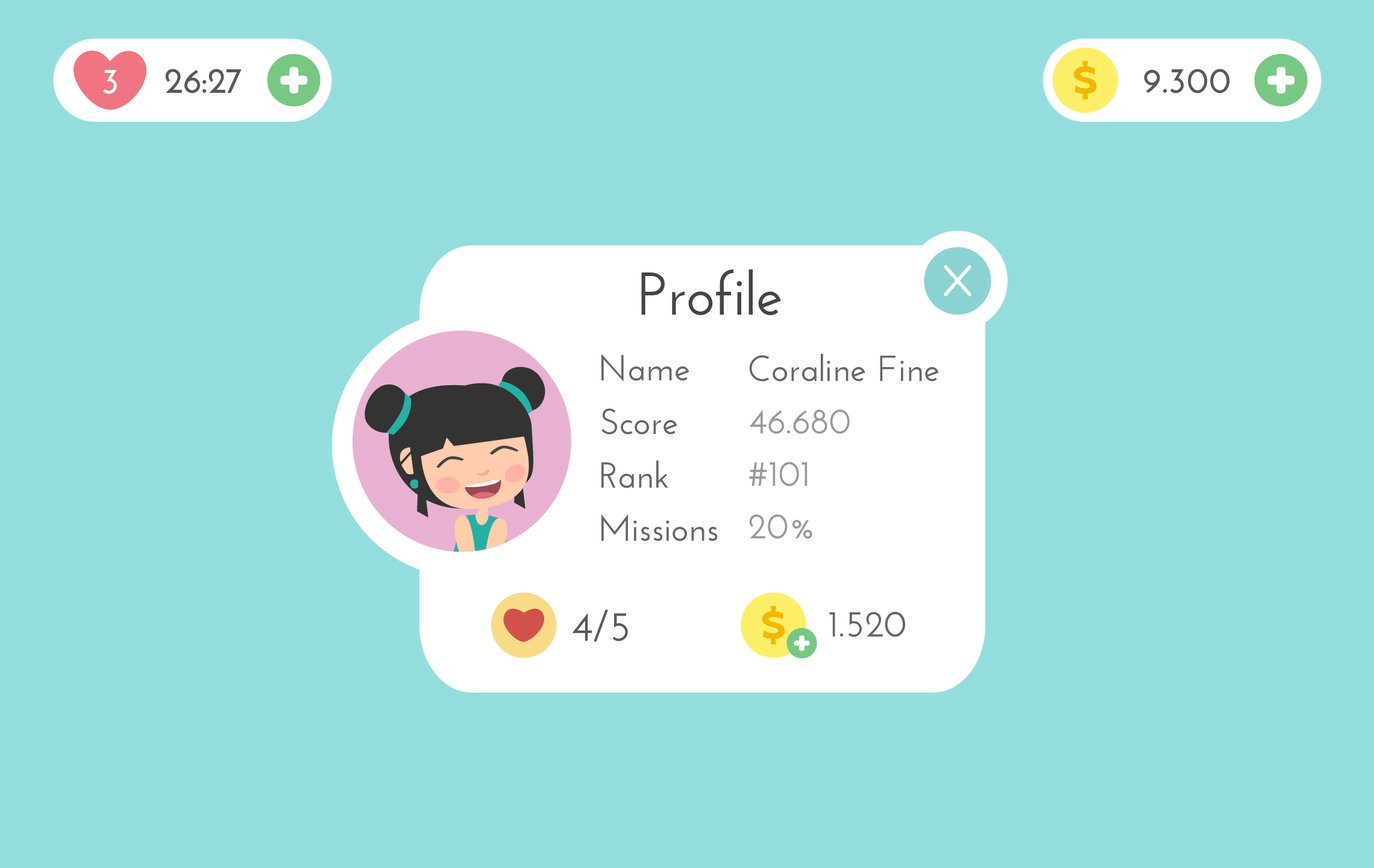
<style>
.page{position:relative;width:1374px;height:868px;background:#93dedd}
.page>*{position:absolute;margin:0}
.t1{font:36.2px "JosefinSans-Bold";color:#ffffff}
.t2{font:36.2px "JosefinSans-Bold";color:#595959}
.t3{font:60.3px "JosefinSans-SemiBold";color:#444444}
.t4{font:36.2px "JosefinSans-SemiBold";color:#666666}
.t5{font:36.2px "JosefinSans-SemiBold";color:#999999}
.t6{font:42.2px "JosefinSans-SemiBold";color:#595959}
.t7{font:37.4px "JosefinSans-SemiBold";color:#666666}
</style>
<div class="page">
<p class="t1" style="left:103px;top:70px;width:14px;height:24px">3</p>
<p class="t2" style="left:165px;top:69px;width:77px;height:24px">26:27</p>
<p class="t2" style="left:1144px;top:69px;width:86px;height:24px">9.300</p>
<p class="t3" style="left:641px;top:269px;width:140px;height:46px">Profile</p>
<p class="t4" style="left:601px;top:354px;width:88px;height:27px">Name</p>
<p class="t4" style="left:749px;top:354px;width:190px;height:27px">Coraline Fine</p>
<p class="t4" style="left:601px;top:408px;width:76px;height:27px">Score</p>
<p class="t5" style="left:749px;top:409px;width:101px;height:25px">46.680</p>
<p class="t4" style="left:601px;top:460px;width:67px;height:28px">Rank</p>
<p class="t5" style="left:749px;top:462px;width:59px;height:24px">#101</p>
<p class="t4" style="left:601px;top:514px;width:117px;height:27px">Missions</p>
<p class="t5" style="left:749px;top:514px;width:63px;height:25px">20%</p>
<p class="t6" style="left:572px;top:609px;width:56px;height:33px">4/5</p>
<p class="t7" style="left:829px;top:612px;width:76px;height:25px">1.520</p>
</div>
